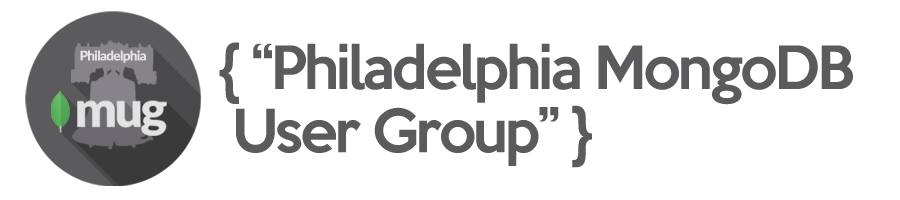
<style>
.page{position:relative;width:900px;height:200px;background:#ffffff}
.page>*{position:absolute;margin:0}
.t1{font:13.4px "Lato-Black";letter-spacing:-0.05em;color:#e3e3e3}
.t2{font:54.6px/63.2px "KeepCalm-Medium";letter-spacing:-0.05em;color:#5b5a5c}
</style>
<div class="page">
<p class="t1" style="left:80px;top:50px;width:66px;height:13px">Philadelphia</p>
<p class="t2" style="left:219px;top:42px;width:634px;height:126px">{ “Philadelphia MongoDB<br> User Group” }</p>
</div>
